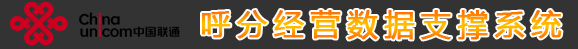
<style>
.page{position:relative;width:578px;height:49px;background:#333333}
.page>*{position:absolute;margin:0}
.t1{font:30px "MicrosoftYaHei";letter-spacing:0.2em;font-weight:bold}
</style>
<div class="page">
<p class="t1" style="left:202px;top:10px;width:360px;height:30px">呼分经营数据支撑系统</p>
</div>
